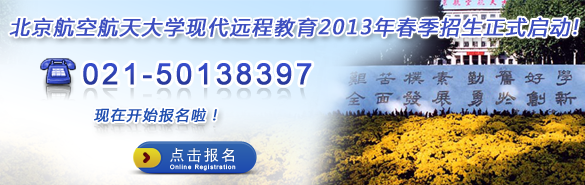
<style>
.page{position:relative;width:585px;height:185px}
.page>*{position:absolute;margin:0}
.t1{font:19.5px "MicrosoftYaHei";letter-spacing:0.1em;color:#3c4ebf;font-weight:bold;font-style:italic}
.t2{font:29.2px "ArialMT";letter-spacing:0.1em;color:#3043b4;font-weight:bold}
.t3{font:29.2px "ArialMT";letter-spacing:0.1em;font-weight:bold}
.t4{font:14.3px "MicrosoftYaHei";letter-spacing:0.1em;color:#1f4daf;font-weight:bold;font-style:italic}
.t5{font:15.6px "AdobeHeitiStd-Regular";letter-spacing:0.1em;color:#ffffff}
.t6{font:5.8px "ArialMT";letter-spacing:0.15em;color:#ffffff}
</style>
<div class="page">
<p class="t1" style="left:9px;top:17px;width:570px;height:20px">北京航空航天大学现代远程教育2013年春季招生正式启动!</p>
<p class="t2" style="left:83px;top:63px;width:229px;height:22px">021-50138397</p>
<p class="t3" style="left:83px;top:87px;width:229px;height:23px">021-50138397</p>
<p class="t4" style="left:94px;top:108px;width:123px;height:15px">现在开始报名啦！</p>
<p class="t5" style="left:170px;top:147px;width:64px;height:16px">点击报名</p>
<p class="t6" style="left:170px;top:164px;width:66px;height:7px">Online Registration</p>
</div>
